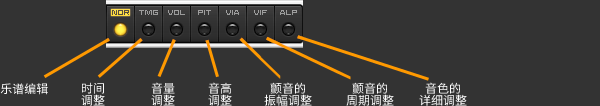
<style>
.page{position:relative;width:600px;height:106px;background:#333333}
.page>*{position:absolute;margin:0}
.t1{font:12px "Sarasa-Gothic-SC-Regular";color:#ffffff}
.t2{font:12px/12px "Sarasa-Gothic-SC-Regular";color:#ffffff}
</style>
<div class="page">
<p class="t1" style="left:0px;top:83px;width:48px;height:12px">乐谱编辑</p>
<p class="t2" style="left:81px;top:82px;width:24px;height:24px;text-align:center">时间<br>调整</p>
<p class="t2" style="left:151px;top:82px;width:24px;height:24px;text-align:center">音量<br>调整</p>
<p class="t2" style="left:208px;top:82px;width:24px;height:24px;text-align:center">音高<br>调整</p>
<p class="t2" style="left:264px;top:82px;width:48px;height:24px;text-align:center">颤音的<br>振幅调整</p>
<p class="t2" style="left:346px;top:82px;width:48px;height:24px;text-align:center">颤音的<br>周期调整</p>
<p class="t2" style="left:419px;top:82px;width:48px;height:24px;text-align:center">音色的<br>详细调整</p>
</div>
